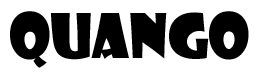
<style>
.page{position:relative;width:265px;height:77px;background:#ffffff}
.page>*{position:absolute;margin:0}
.t1{font:60px "ShowcardGothic-Reg";color:#000000}
</style>
<div class="page">
<p class="t1" style="left:10px;top:11px;width:239px;height:57px">QUANGO</p>
</div>
